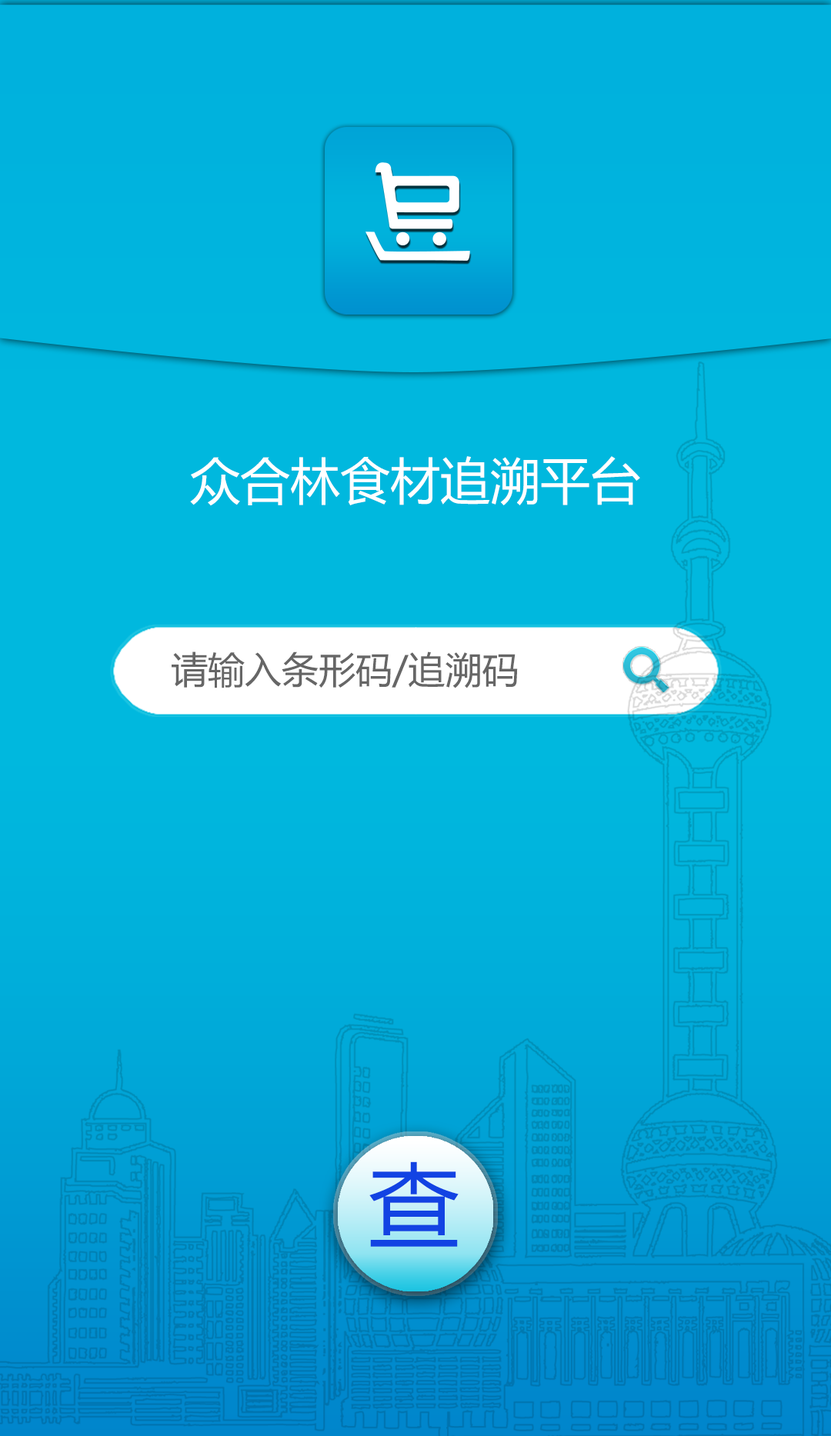
<style>
.page{position:relative;width:831px;height:1436px}
.page>*{position:absolute;margin:0}
.t1{font:50px "MicrosoftYaHei";color:#ffffff;font-variant:small-caps}
.t2{font:36.9px "MicrosoftYaHei";color:#666666;font-variant:small-caps}
.t3{font:91.2px "MicrosoftYaHei";color:#1243e3;font-variant:small-caps}
</style>
<div class="page">
<p class="t1" style="left:190px;top:456px;width:450px;height:50px">众合林食材追溯平台</p>
<p class="t2" style="left:171px;top:651px;width:347px;height:37px">请输入条形码/追溯码</p>
<p class="t3" style="left:369px;top:1161px;width:89px;height:86px">查</p>
</div>
